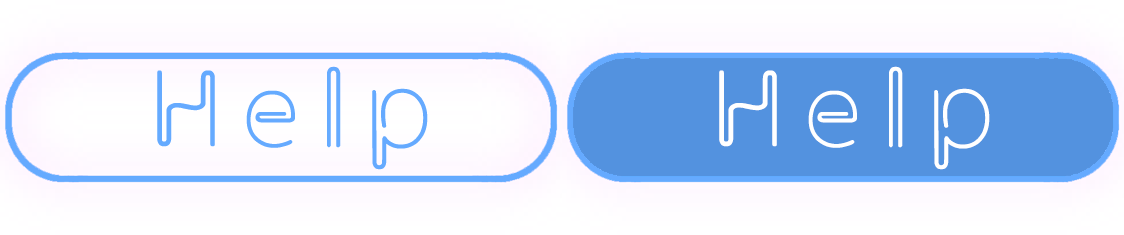
<style>
.page{position:relative;width:1124px;height:235px;background:#5392df}
.page>*{position:absolute;margin:0}
.t1{font:108px "Clip";letter-spacing:0.2em;color:#65aaff}
.t2{font:108px "Clip";letter-spacing:0.2em;color:#ffffff}
</style>
<div class="page">
<p class="t1" style="left:157px;top:66px;width:271px;height:104px">Help</p>
<p class="t2" style="left:719px;top:66px;width:271px;height:104px">Help</p>
</div>
